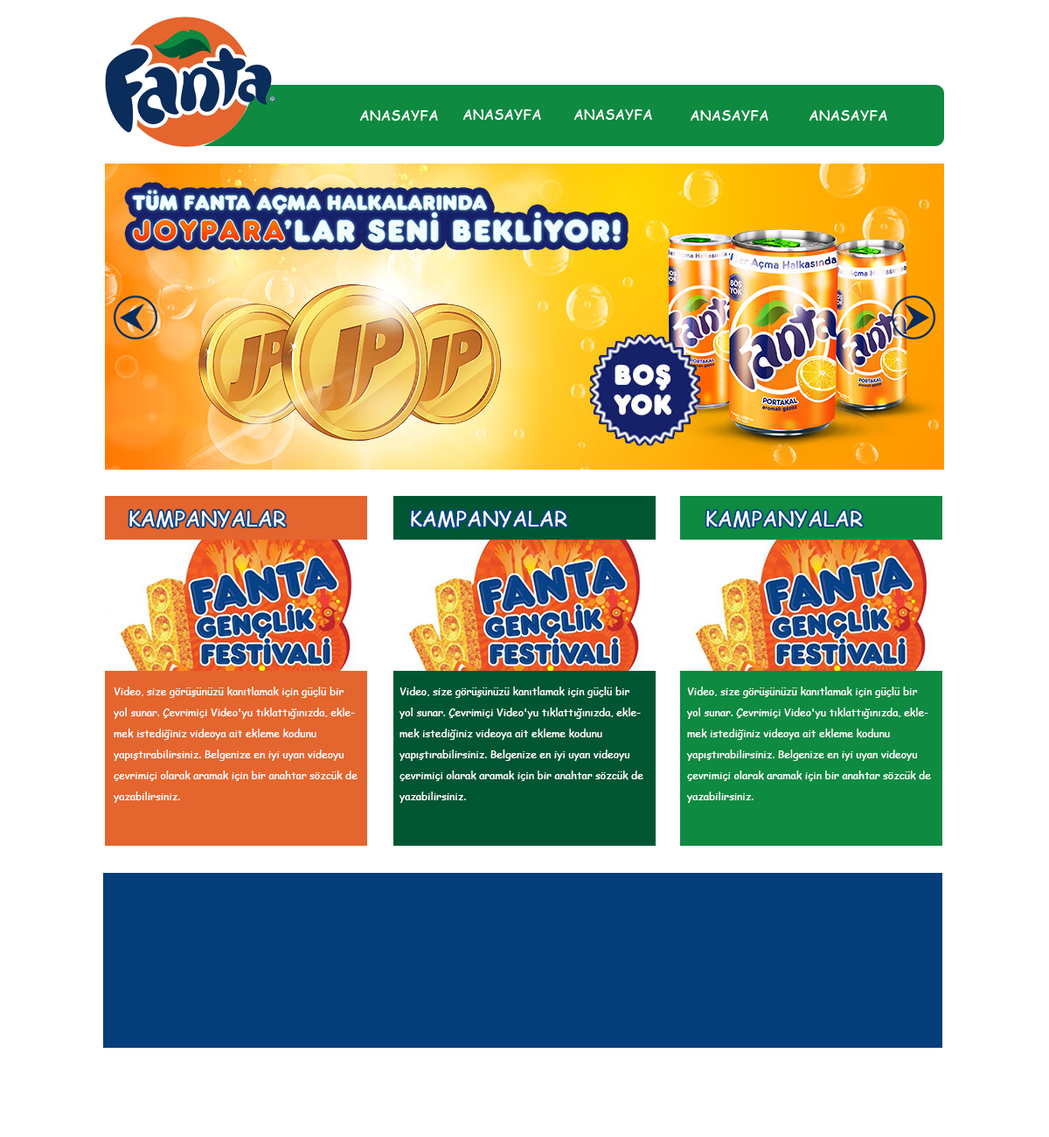
<style>
.page{position:relative;width:1049px;height:1137px;background:#ffffff}
.page>*{position:absolute;margin:0}
.t1{font:14px "ComicSansMS";color:#ffffff}
.t2{font:21px "ComicSansMS";color:#ffffff}
.t3{font:10.5px/21px "ComicSansMS";color:#ffffff}
</style>
<div class="page">
<p class="t1" style="left:360px;top:110px;width:78px;height:11px">ANASAYFA</p>
<p class="t1" style="left:463px;top:109px;width:78px;height:11px">ANASAYFA</p>
<p class="t1" style="left:574px;top:109px;width:78px;height:11px">ANASAYFA</p>
<p class="t1" style="left:691px;top:110px;width:77px;height:11px">ANASAYFA</p>
<p class="t1" style="left:810px;top:110px;width:77px;height:11px">ANASAYFA</p>
<p class="t2" style="left:129px;top:511px;width:157px;height:16px">KAMPANYALAR</p>
<p class="t2" style="left:411px;top:511px;width:156px;height:16px">KAMPANYALAR</p>
<p class="t2" style="left:706px;top:511px;width:157px;height:16px">KAMPANYALAR</p>
<p class="t3" style="left:114px;top:686px;width:244px;height:117px">Video, size görüşünüzü kanıtlamak için güçlü bir yol sunar. Çevrimiçi Video'yu tıklattığınızda, eklemek istediğiniz videoya ait ekleme kodunu yapıştırabilirsiniz. Belgenize en iyi uyan videoyu çevrimiçi olarak aramak için bir anahtar sözcük de yazabilirsiniz.</p>
<p class="t3" style="left:400px;top:686px;width:243px;height:117px">Video, size görüşünüzü kanıtlamak için güçlü bir yol sunar. Çevrimiçi Video'yu tıklattığınızda, eklemek istediğiniz videoya ait ekleme kodunu yapıştırabilirsiniz. Belgenize en iyi uyan videoyu çevrimiçi olarak aramak için bir anahtar sözcük de yazabilirsiniz.</p>
<p class="t3" style="left:687px;top:686px;width:244px;height:117px">Video, size görüşünüzü kanıtlamak için güçlü bir yol sunar. Çevrimiçi Video'yu tıklattığınızda, eklemek istediğiniz videoya ait ekleme kodunu yapıştırabilirsiniz. Belgenize en iyi uyan videoyu çevrimiçi olarak aramak için bir anahtar sözcük de yazabilirsiniz.</p>
</div>
